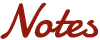
<style>
.page{position:relative;width:100px;height:40px;background:#ffffff}
.page>*{position:absolute;margin:0}
.t1{font:48px "Damion";color:#931b0c}
</style>
<div class="page">
<p class="t1" style="left:0px;top:2px;width:98px;height:37px">Notes</p>
</div>
